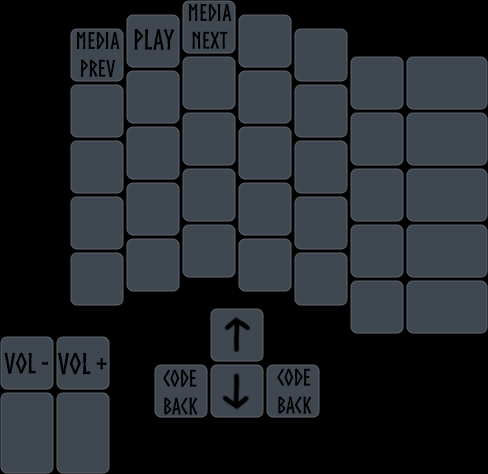
<style>
.page{position:relative;width:488px;height:474px;background:#3f4750}
.page>*{position:absolute;margin:0}
.t1{font:23px "Norse-Bold";color:#000000}
.t2{font:28px "Norse-Bold";color:#000000}
.t3{font:29px "Norse-Bold";color:#000000}
</style>
<div class="page">
<p class="t1" style="left:189px;top:3px;width:43px;height:46px;text-align:center">Media<br>Next</p>
<p class="t2" style="left:134px;top:28px;width:41px;height:22px">Play</p>
<p class="t1" style="left:77px;top:31px;width:43px;height:46px;text-align:center">Media<br>Prev</p>
<p class="t2" style="left:4px;top:352px;width:44px;height:22px">VOL -</p>
<p class="t3" style="left:57px;top:352px;width:50px;height:23px">VOL +</p>
<p class="t1" style="left:163px;top:369px;width:35px;height:46px;text-align:center">Code<br>Back</p>
<p class="t1" style="left:277px;top:368px;width:35px;height:46px;text-align:center">Code<br>Back</p>
</div>
